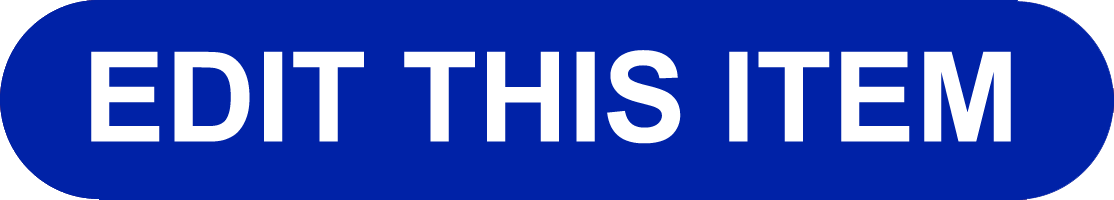
<style>
.page{position:relative;width:1114px;height:200px;background:#0022a7}
.page>*{position:absolute;margin:0}
.t1{font:125px "Arial-BoldMT";color:#ffffff}
</style>
<div class="page">
<p class="t1" style="left:91px;top:50px;width:920px;height:94px">EDIT THIS ITEM</p>
</div>
